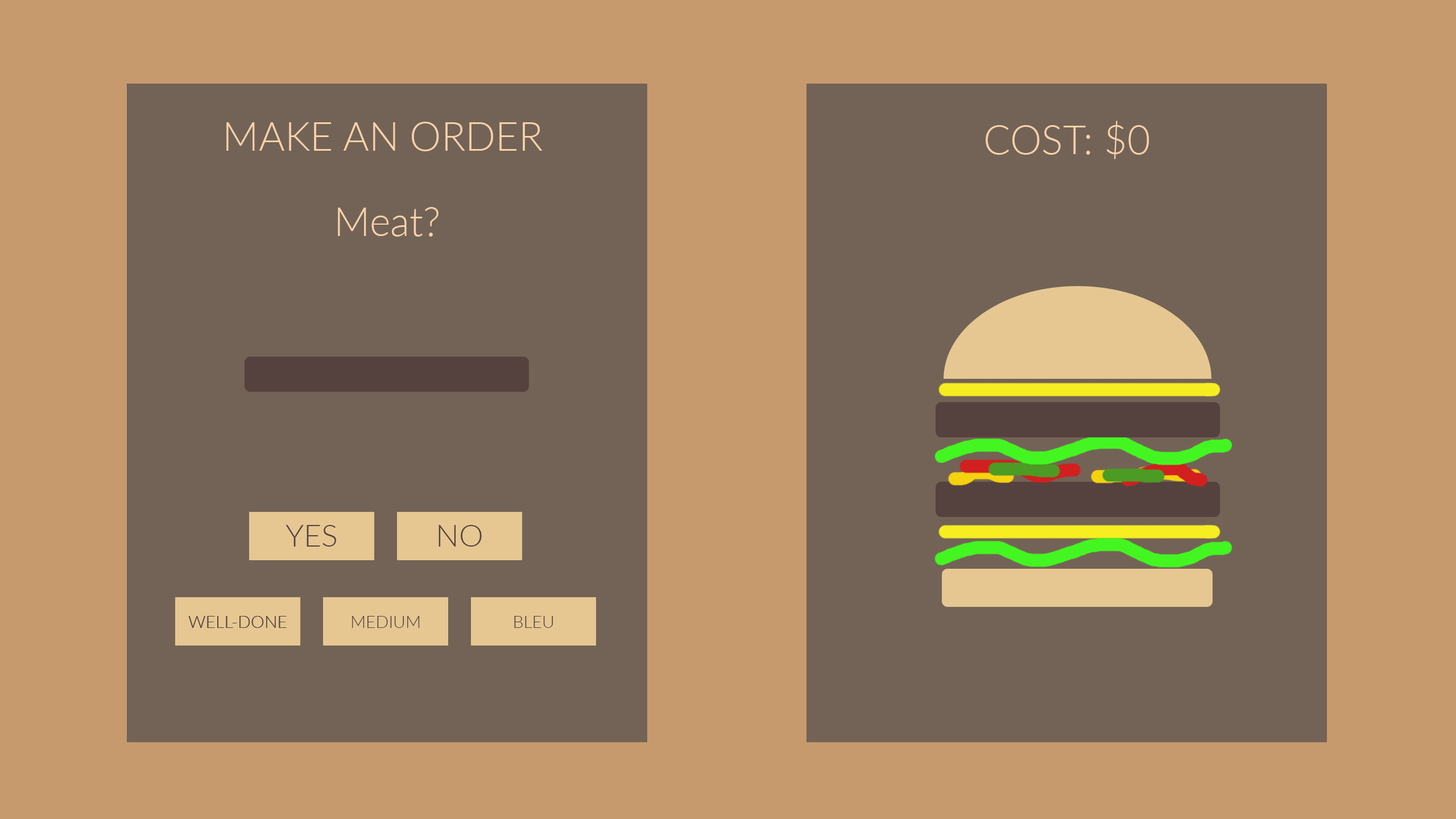
<style>
.page{position:relative;width:1456px;height:819px;background:#736356}
.page>*{position:absolute;margin:0}
.t1{font:39.8px "Lato-Light";color:#f8d2aa}
.t2{font:30.7px "Lato-Light";color:#55423e}
.t3{font:17.1px "Lato-Light";color:#55423e}
</style>
<div class="page">
<p class="t1" style="left:226px;top:122px;width:317px;height:29px">MAKE AN ORDER</p>
<p class="t1" style="left:986px;top:121px;width:163px;height:38px">COST: $0</p>
<p class="t1" style="left:338px;top:207px;width:101px;height:30px">Meat?</p>
<p class="t2" style="left:286px;top:525px;width:50px;height:22px">YES</p>
<p class="t2" style="left:439px;top:525px;width:43px;height:22px">NO</p>
<p class="t3" style="left:188px;top:616px;width:99px;height:12px">WELL-DONE</p>
<p class="t3" style="left:188px;top:616px;width:99px;height:12px">WELL-DONE</p>
<p class="t3" style="left:352px;top:616px;width:68px;height:12px">MEDIUM</p>
<p class="t3" style="left:514px;top:616px;width:39px;height:12px">BLEU</p>
</div>
